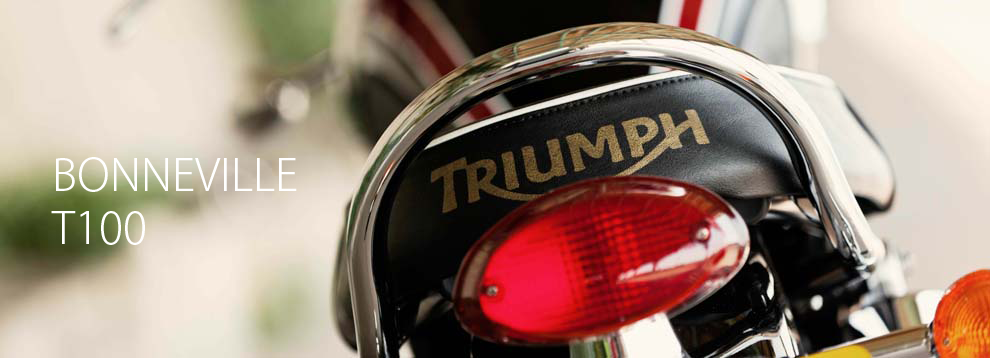
<style>
.page{position:relative;width:990px;height:358px}
.page>*{position:absolute;margin:0}
.t1{font:44px "KozGoPr6N-Light";color:#ffffff}
</style>
<div class="page">
<p class="t1" style="left:51px;top:157px;width:246px;height:88px">BONNEVILLE<br>T100</p>
</div>
